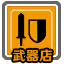
<style>
.page{position:relative;width:64px;height:64px}
.page>*{position:absolute;margin:0}
.t1{font:13px "HYWenHei-HEW";letter-spacing:0.045em;color:#f19602}
</style>
<div class="page">
<p class="t1" style="left:13px;top:49px;width:39px;height:13px">武器店</p>
</div>
